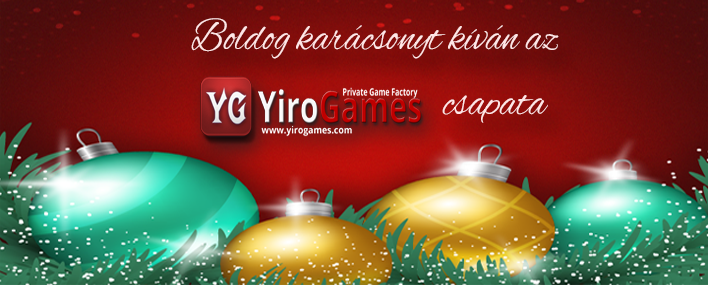
<style>
.page{position:relative;width:708px;height:285px}
.page>*{position:absolute;margin:0}
.t1{font:45.9px "AlexBrush-Regular";color:#ffe6e6;scale:0.87 1}
</style>
<div class="page">
<p class="t1" style="left:191px;top:18px;width:368px;height:105px">Boldog karácsonyt kíván az<br>       csapata</p>
</div>
